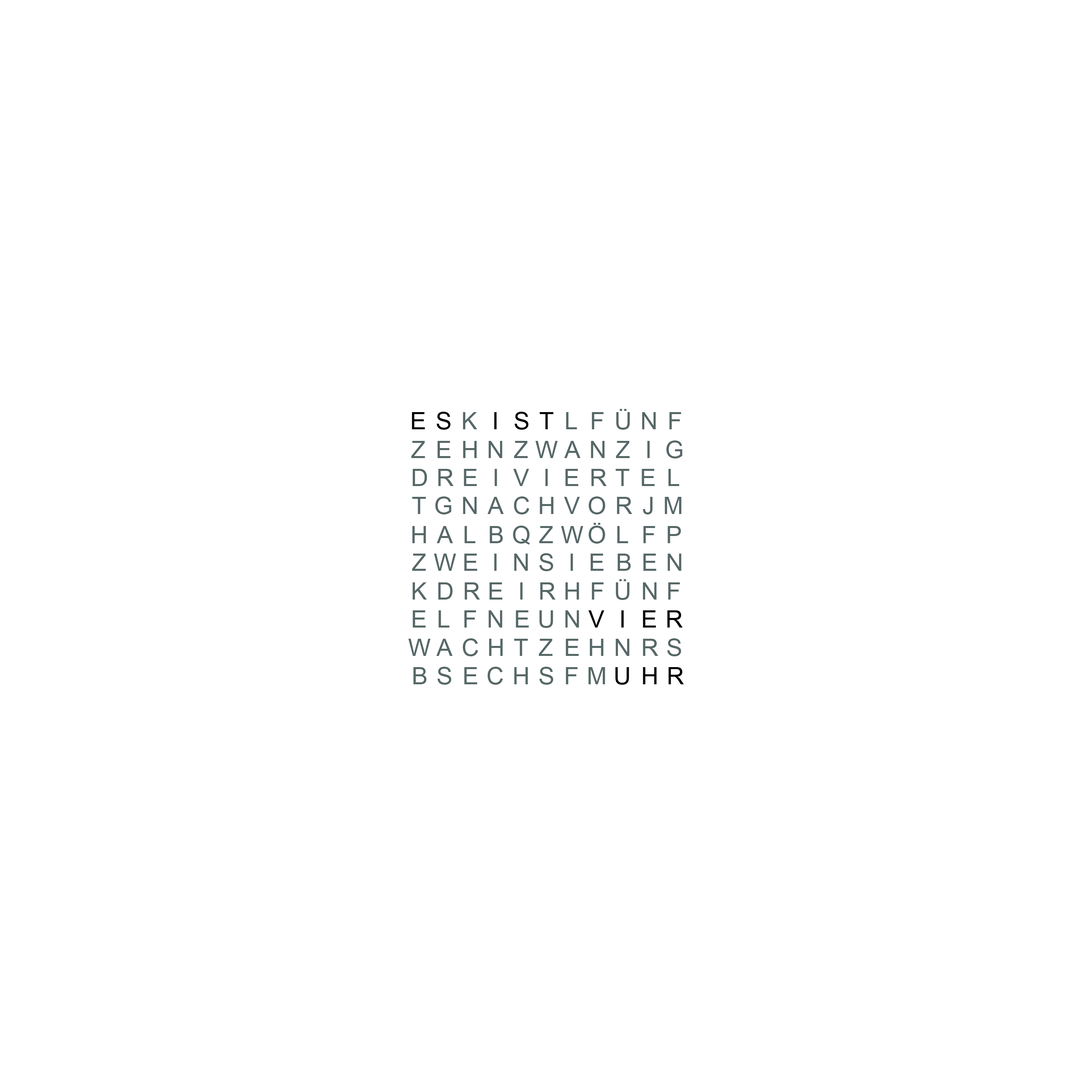
<style>
.page{position:relative;width:1092px;height:1092px;background:#ffffff}
.page>*{position:absolute;margin:0}
.t1{font:24px "ArialMT";text-transform:uppercase}
.t2{font:24px "ArialMT";color:#576767;text-transform:uppercase}
</style>
<div class="page">
<p class="t1" style="left:412px;top:409px;width:269px;height:21px">ESKISTLFÜNF</p>
<p class="t2" style="left:411px;top:440px;width:271px;height:18px">zehnzwanzig</p>
<p class="t2" style="left:412px;top:469px;width:267px;height:17px">dreiviertel</p>
<p class="t2" style="left:412px;top:496px;width:269px;height:18px">TGnachvorjm</p>
<p class="t2" style="left:412px;top:523px;width:269px;height:22px">halbqzwölfp</p>
<p class="t2" style="left:412px;top:553px;width:269px;height:18px">zweinsieben</p>
<p class="t2" style="left:412px;top:579px;width:268px;height:21px">kdreirhfünf</p>
<p class="t1" style="left:412px;top:610px;width:271px;height:18px">elfneunvier</p>
<p class="t2" style="left:408px;top:638px;width:273px;height:18px">wachtzehnrs</p>
<p class="t2" style="left:413px;top:667px;width:271px;height:18px">bsechsfmuhr</p>
</div>
